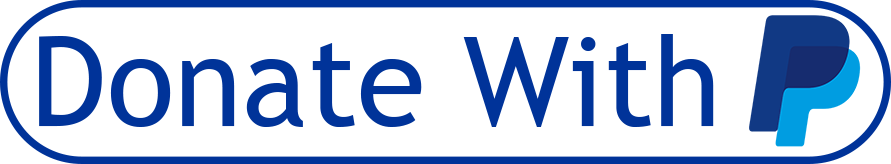
<style>
.page{position:relative;width:891px;height:164px;background:#ffffff}
.page>*{position:absolute;margin:0}
.t1{font:125px "TrebuchetMS";color:#003399}
</style>
<div class="page">
<p class="t1" style="left:39px;top:34px;width:675px;height:93px">Donate With</p>
</div>
